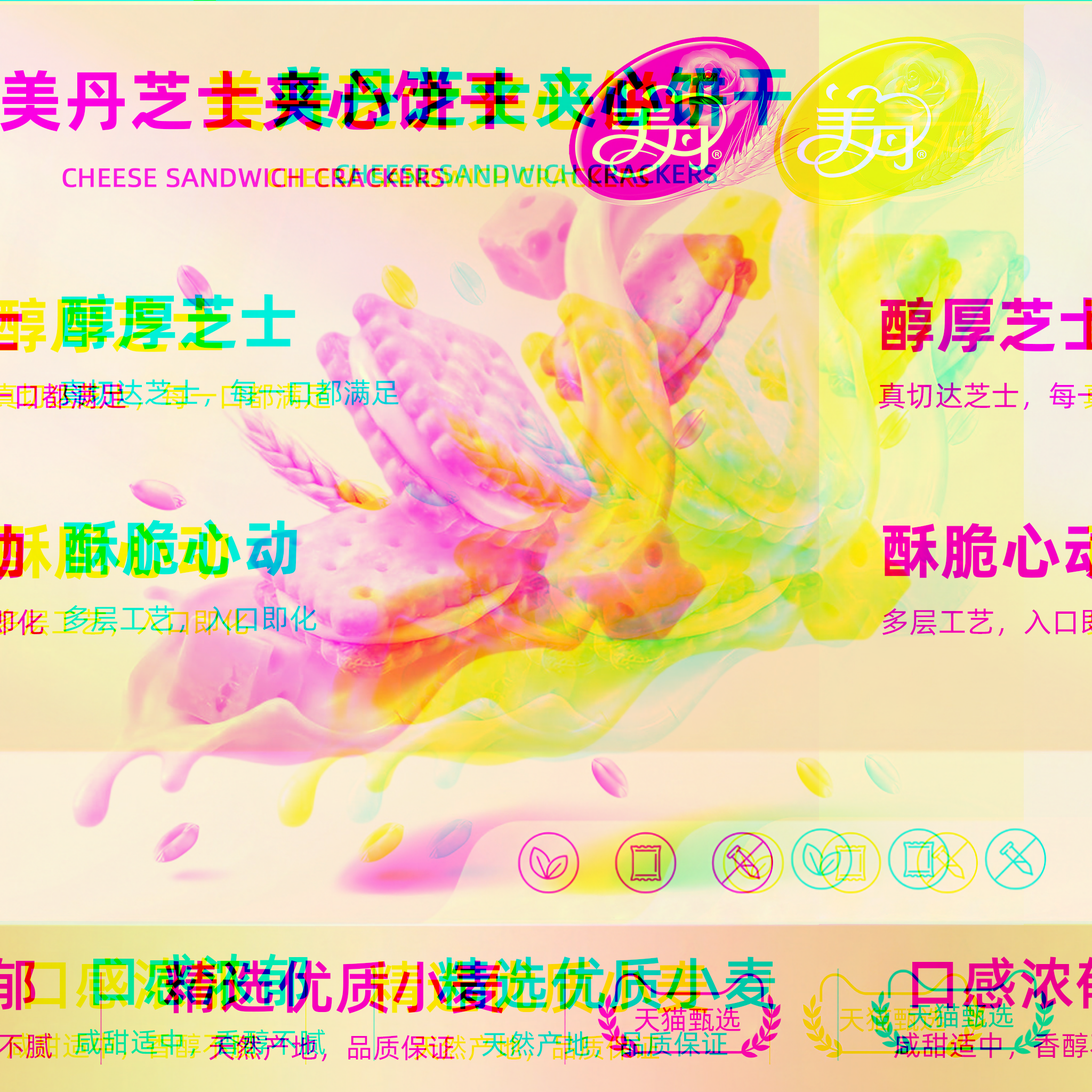
<style>
.page{position:relative;width:1092px;height:1092px}
.page>*{position:absolute;margin:0}
.t1{font:66.6px "AlibabaPuHuiTi-Bold"}
.t2{font:26.2px "AlibabaPuHuiTi-Regular";font-weight:bold}
.t3{font:61.3px "AlibabaPuHuiTi-Bold"}
.t4{font:28.9px "AlibabaPuHuiTi-Regular"}
.t5{font:57.8px "AlibabaPuHuiTi-Medium"}
.t6{font:58.2px "AlibabaPuHuiTi-Medium"}
.t7{font:27.5px "AlibabaPuHuiTi-Regular"}
.t8{font:28.4px "AlibabaPuHuiTi-Regular"}
.t9{font:28px "AlibabaPuHuiTi-Regular"}
</style>
<div class="page">
<p class="t1" style="left:273px;top:65px;width:518px;height:62px">美丹芝士夹心饼干</p>
<p class="t2" style="left:335px;top:163px;width:382px;height:20px">CHEESE SANDWICH CRACKERS</p>
<p class="t3" style="left:61px;top:293px;width:234px;height:55px">醇厚芝士</p>
<p class="t4" style="left:60px;top:378px;width:339px;height:28px">真切达芝士，每一口都满足</p>
<p class="t3" style="left:64px;top:518px;width:233px;height:57px">酥脆心动</p>
<p class="t4" style="left:63px;top:604px;width:254px;height:28px">多层工艺，入口即化</p>
<p class="t5" style="left:93px;top:952px;width:215px;height:54px">口感浓郁</p>
<p class="t6" style="left:437px;top:955px;width:339px;height:54px">精选优质小麦</p>
<p class="t7" style="left:907px;top:1002px;width:107px;height:25px">天猫甄选</p>
<p class="t8" style="left:75px;top:1027px;width:250px;height:28px">咸甜适中，香醇不腻</p>
<p class="t9" style="left:482px;top:1030px;width:245px;height:27px">天然产地，品质保证</p>
</div>
